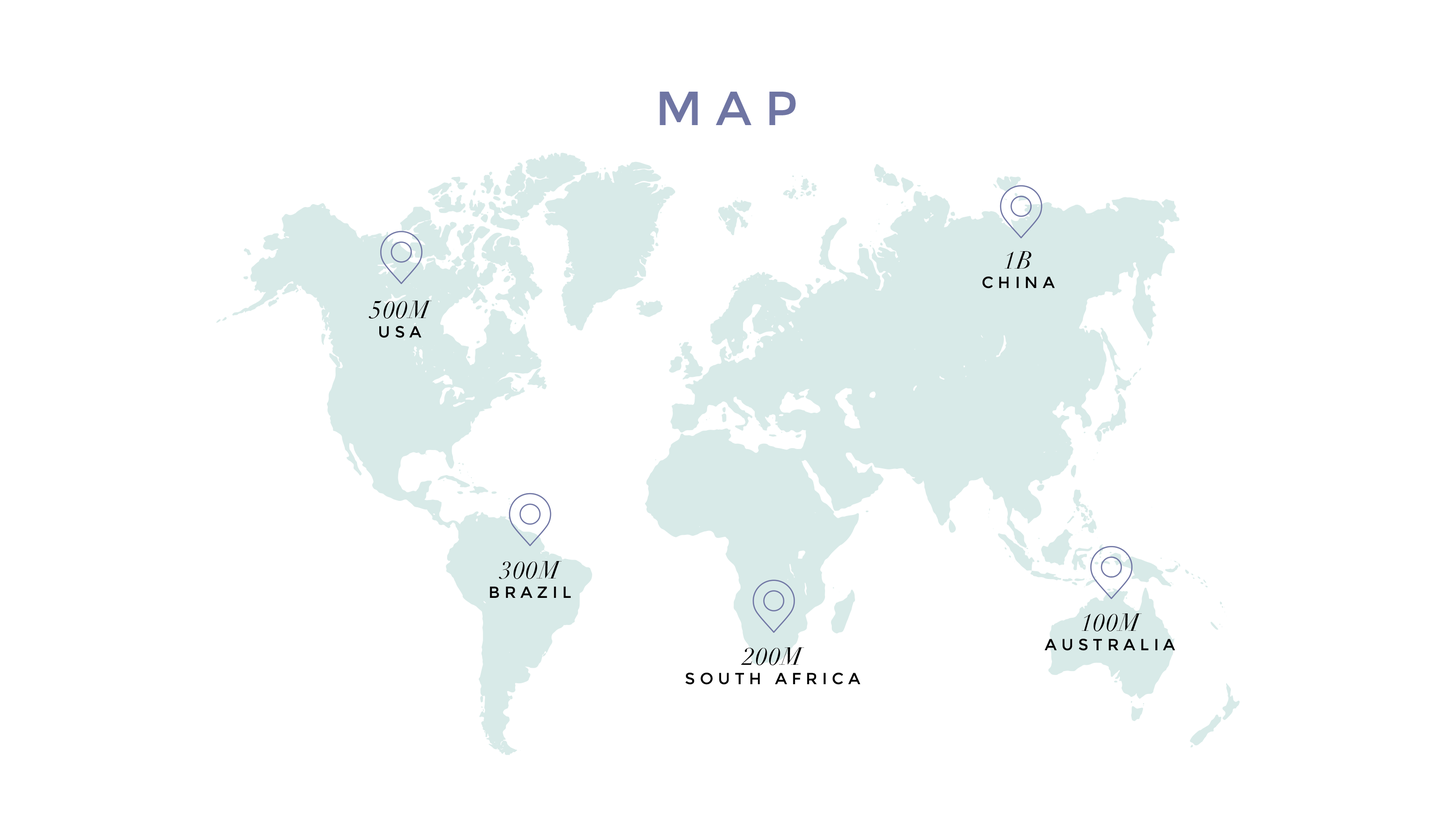
<style>
.page{position:relative;width:1455px;height:819px;background:#ffffff}
.page>*{position:absolute;margin:0}
.t1{font:47.9px "Montserrat-Regular";letter-spacing:0.28em;color:#6f75a3}
.t2{font:16.2px "Montserrat-Regular";letter-spacing:0.28em;color:#000000}
.t3{font:24.3px/37.2px "Didot-Italic";letter-spacing:0.05em;color:#000000}
</style>
<div class="page">
<p class="t1" style="left:660px;top:92px;width:136px;height:33px">MAP</p>
<p class="t2" style="left:982px;top:251px;width:73px;height:38px;text-align:center"><span class="t3">1B<br></span>CHINA</p>
<p class="t3" style="left:369px;top:301px;width:63px;height:37px;text-align:center">500M<br><span class="t2">USA</span></p>
<p class="t2" style="left:490px;top:561px;width:81px;height:37px;text-align:center"><span class="t3">300M<br></span>BRAZIL</p>
<p class="t2" style="left:1045px;top:614px;width:130px;height:37px;text-align:center"><span class="t3">100M<br></span>AUSTRALIA</p>
<p class="t2" style="left:685px;top:648px;width:176px;height:37px;text-align:center"><span class="t3">200M<br></span>SOUTH AFRICA</p>
</div>
